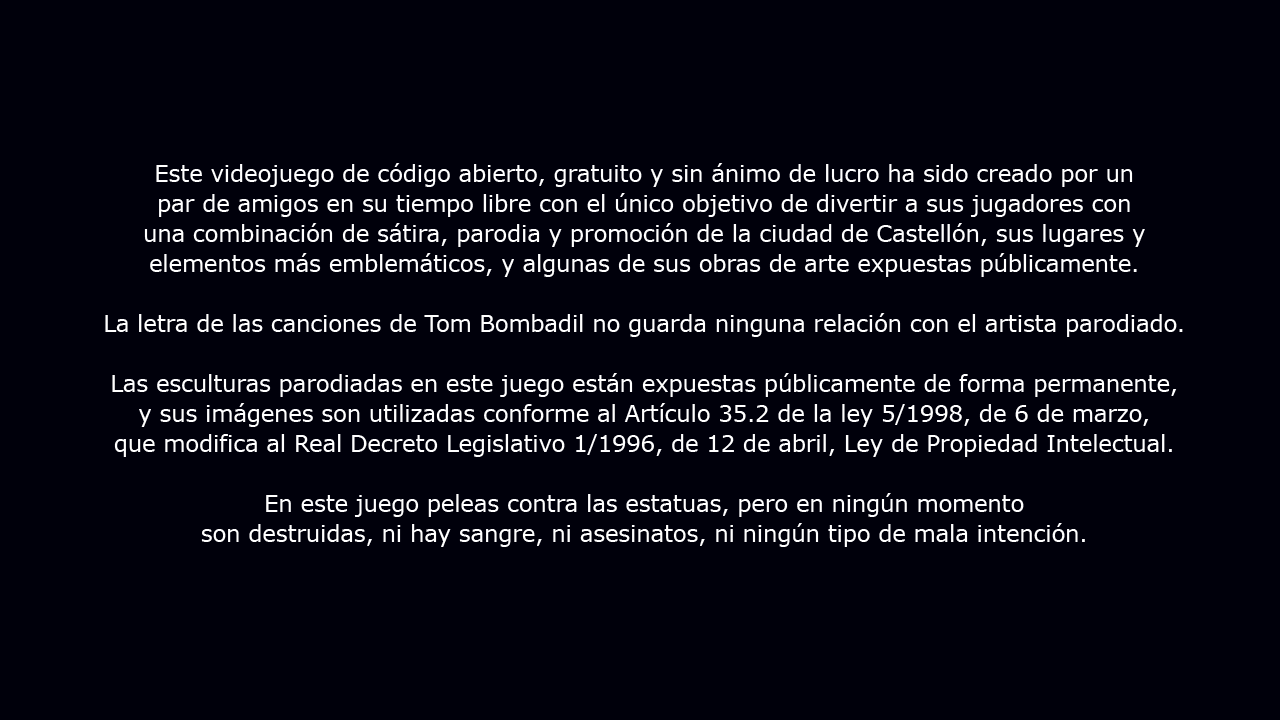
<style>
.page{position:relative;width:1280px;height:720px;background:#00000b}
.page>*{position:absolute;margin:0}
.t1{font:22.5px/30px "Verdana";color:#ffffff}
</style>
<div class="page">
<p class="t1" style="left:105px;top:163px;width:1078px;height:384px;text-align:center">Este videojuego de código abierto, gratuito y sin ánimo de lucro ha sido creado por un <br>par de amigos en su tiempo libre con el único objetivo de divertir a sus jugadores con <br>una combinación de sátira, parodia y promoción de la ciudad de Castellón, sus lugares y <br>elementos más emblemáticos, y algunas de sus obras de arte expuestas públicamente.<br><br>La letra de las canciones de Tom Bombadil no guarda ninguna relación con el artista parodiado.<br><br>Las esculturas parodiadas en este juego están expuestas públicamente de forma permanente, <br>y sus imágenes son utilizadas conforme al Artículo 35.2 de la ley 5/1998, de 6 de marzo, <br>que modifica al Real Decreto Legislativo 1/1996, de 12 de abril, Ley de Propiedad Intelectual.<br><br>En este juego peleas contra las estatuas, pero en ningún momento <br>son destruidas, ni hay sangre, ni asesinatos, ni ningún tipo de mala intención.</p>
</div>
